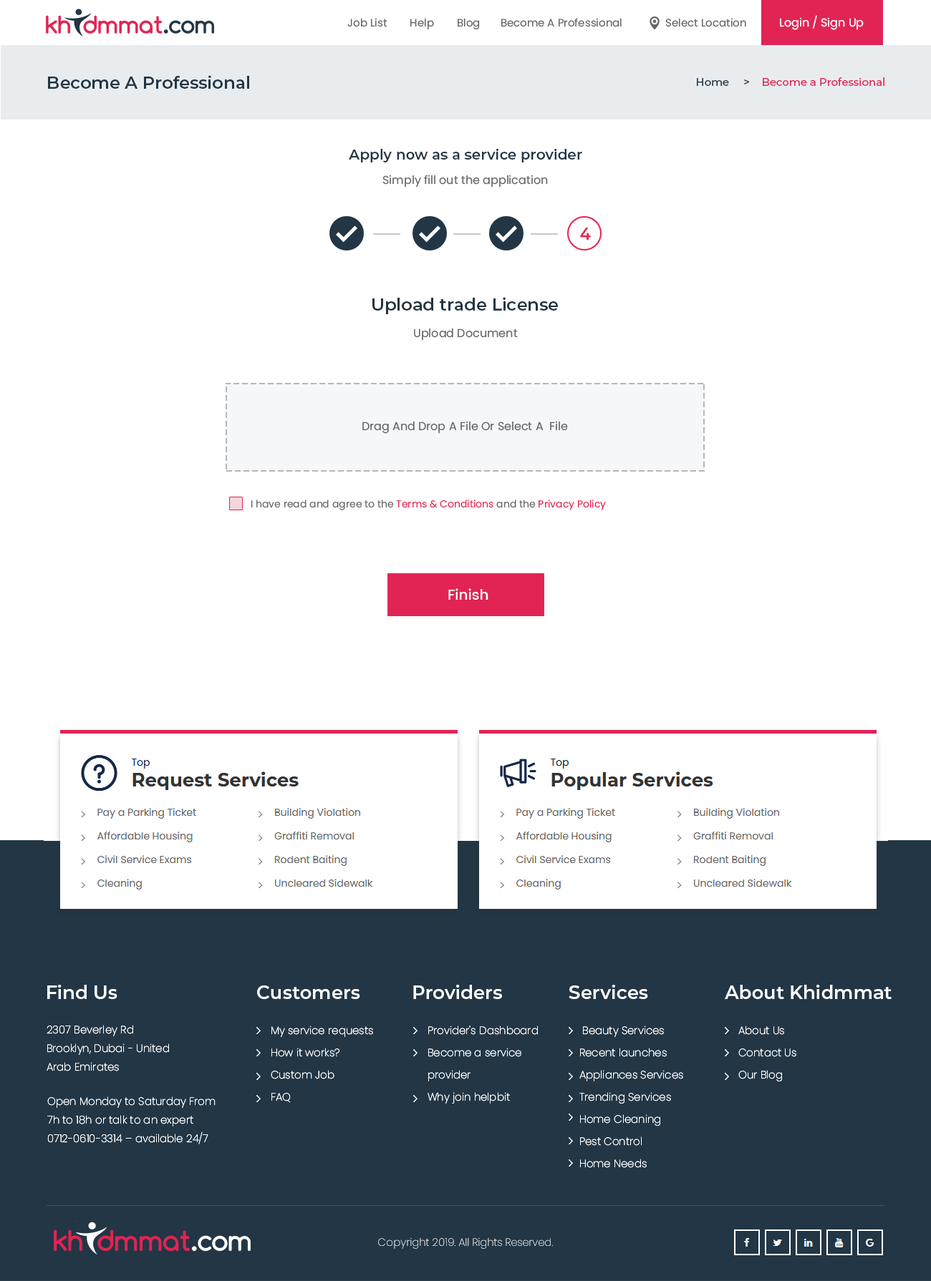
<style>
.page{position:relative;width:931px;height:1281px;background:#ffffff}
.page>*{position:absolute;margin:0}
.t1{font:10.7px "Poppins-Regular";color:#666666}
.t2{font:10px "Poppins-Regular";color:#666666}
.t3{font:11.5px "Poppins-Regular";color:#ffffff}
.t4{font:17.2px "Montserrat-SemiBold";color:#223645}
.t5{font:10.7px "Montserrat-Medium";color:#e12454}
.t6{font:10.7px "Montserrat-Medium";color:#05315e}
.t7{font:10.7px "Montserrat-Medium";color:#223645}
.t8{font:14.3px "Montserrat-SemiBold";color:#213544}
.t9{font:11.5px "Poppins-Regular";color:#666666}
.t10{font:16.5px "Montserrat-SemiBold";color:#e12454}
.t11{font:17.2px "Montserrat-SemiBold";color:#213544}
.t12{font:10px "Poppins-Regular";color:#e12454}
.t13{font:14.3px "Poppins-Medium";color:#ffffff}
.t14{font:18.6px "Montserrat-SemiBold";color:#ffffff}
.t15{font:10.7px/18.6px "Poppins-ExtraLight";color:#ffffff}
.t16{font:10.7px/22.2px "Poppins-ExtraLight";color:#ffffff}
.t17{font:10.7px "Poppins-ExtraLight"}
</style>
<div class="page">
<p class="t1" style="left:347px;top:15px;width:516px;height:15px"><span class="t2">       </span> Job List        Help        Blog       Become A Professional               Select Location            <span class="t3">Login / Sign Up</span></p>
<p class="t4" style="left:48px;top:75px;width:201px;height:14px">Become A Professional</p>
<p class="t5" style="left:697px;top:77px;width:187px;height:9px"><span class="t6">    </span><span class="t7">Home     &gt;    </span>Become a Professional</p>
<p class="t8" style="left:349px;top:149px;width:233px;height:13px">Apply now as a service provider</p>
<p class="t9" style="left:382px;top:175px;width:166px;height:13px">Simply fill out the application</p>
<p class="t10" style="left:580px;top:228px;width:11px;height:12px">4</p>
<p class="t11" style="left:372px;top:297px;width:186px;height:17px">Upload trade License</p>
<p class="t9" style="left:414px;top:329px;width:104px;height:12px">Upload Document</p>
<p class="t9" style="left:362px;top:421px;width:206px;height:13px">Drag And Drop A File Or Select A  File</p>
<p class="t2" style="left:251px;top:500px;width:355px;height:10px">I have read and agree to the <span class="t12">Terms &amp; Conditions</span> and the <span class="t12">Privacy Policy</span></p>
<p class="t13" style="left:448px;top:588px;width:40px;height:12px">Finish</p>
<p class="t14" style="left:47px;top:985px;width:70px;height:14px">Find Us</p>
<p class="t14" style="left:257px;top:986px;width:103px;height:13px">Customers</p>
<p class="t14" style="left:413px;top:985px;width:89px;height:14px">Providers</p>
<p class="t14" style="left:568px;top:985px;width:80px;height:14px">Services</p>
<p class="t14" style="left:724px;top:985px;width:167px;height:14px">About Khidmmat</p>
<p class="t15" style="left:47px;top:1025px;width:122px;height:47px">2307 Beverley Rd<br>Brooklyn, Dubai - United Arab Emirates</p>
<p class="t16" style="left:271px;top:1026px;width:102px;height:77px">My service requests<br>    How it works?<br>    Custom Job<br>    FAQ</p>
<p class="t16" style="left:427px;top:1026px;width:111px;height:78px">Provider's Dashboard<br>    Become a service <br>    provider<br>    Why join helpbit</p>
<p class="t16" style="left:579px;top:1026px;width:104px;height:142px">Beauty Services <br>Recent launches <br>Appliances Services Trending Services <br>Home Cleaning <br>Pest Control <br>Home Needs</p>
<p class="t16" style="left:738px;top:1026px;width:58px;height:56px">About Us<br> Contact Us<br> Our Blog</p>
<p class="t15" style="left:47px;top:1097px;width:168px;height:48px">Open Monday to Saturday From 7h to 18h or talk to an expert 0712-0610-3314 – available 24/7</p>
<p class="t17" style="left:378px;top:1238px;width:175px;height:11px">Copyright 2019. All Rights Reserved.</p>
</div>
